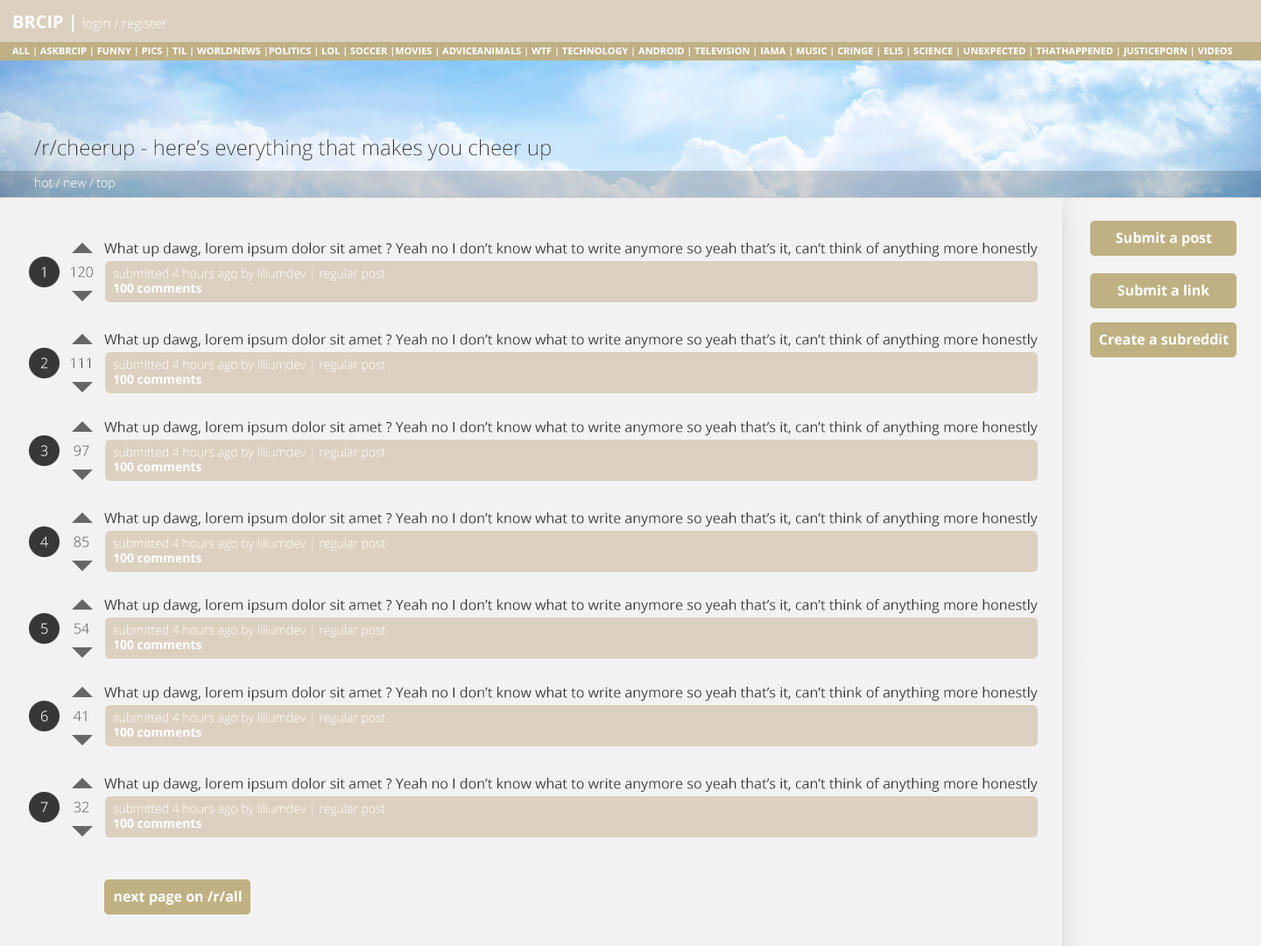
<style>
.page{position:relative;width:1261px;height:946px;background:#f2f2f2}
.page>*{position:absolute;margin:0}
.t1{font:13.1px "OpenSans-Light";color:#ffffff}
.t2{font:17.5px "OpenSans-Bold";color:#ffffff}
.t3{font:9.6px "OpenSans-Bold";color:#ffffff}
.t4{font:21px "OpenSans-Light";color:#373737}
.t5{font:12.3px "OpenSans-Light";color:#ffffff}
.t6{font:14px "OpenSans-Bold";color:#fefefe}
.t7{font:14px "OpenSans";color:#373737}
.t8{font:14px "OpenSans-Light"}
.t9{font:12.3px "OpenSans-Bold";color:#ffffff}
.t10{font:14px "OpenSans-Light";color:#ffffff}
.t11{font:14px "OpenSans-Light";color:#373737}
</style>
<div class="page">
<p class="t1" style="left:13px;top:14px;width:154px;height:18px"><span class="t2">BRCIP | </span>login / register</p>
<p class="t3" style="left:12px;top:46px;width:1220px;height:11px">ALL | ASKBRCIP | FUNNY | PICS | TIL | WORLDNEWS |POLITICS | LOL | SOCCER |MOVIES | ADVICEANIMALS | WTF | TECHNOLOGY | ANDROID | TELEVISION | IAMA | MUSIC | CRINGE | ELI5 | SCIENCE | UNEXPECTED | THATHAPPENED | JUSTICEPORN | VIDEOS</p>
<p class="t4" style="left:34px;top:139px;width:517px;height:21px">/r/cheerup - here’s everything that makes you cheer up</p>
<p class="t5" style="left:35px;top:178px;width:80px;height:12px">hot / new / top</p>
<p class="t6" style="left:1116px;top:232px;width:96px;height:14px">Submit a post</p>
<p class="t7" style="left:104px;top:243px;width:934px;height:14px">What up dawg, lorem ipsum dolor sit amet ? Yeah no I don’t know what to write anymore so yeah that’s it, can’t think of anything more honestly</p>
<p class="t8" style="left:41px;top:266px;width:5px;height:12px">1</p>
<p class="t8" style="left:71px;top:266px;width:22px;height:12px">120</p>
<p class="t5" style="left:113px;top:268px;width:272px;height:25px">submitted 4 hours ago by liliumdev | regular post<br><span class="t9">100 comments</span></p>
<p class="t6" style="left:1117px;top:285px;width:93px;height:11px">Submit a link</p>
<p class="t7" style="left:104px;top:334px;width:934px;height:14px">What up dawg, lorem ipsum dolor sit amet ? Yeah no I don’t know what to write anymore so yeah that’s it, can’t think of anything more honestly</p>
<p class="t6" style="left:1099px;top:334px;width:130px;height:11px">Create a subreddit</p>
<p class="t10" style="left:41px;top:357px;width:7px;height:12px">2</p>
<p class="t11" style="left:71px;top:357px;width:19px;height:12px">111</p>
<p class="t5" style="left:113px;top:359px;width:272px;height:25px">submitted 4 hours ago by liliumdev | regular post<br><span class="t9">100 comments</span></p>
<p class="t7" style="left:104px;top:421px;width:934px;height:14px">What up dawg, lorem ipsum dolor sit amet ? Yeah no I don’t know what to write anymore so yeah that’s it, can’t think of anything more honestly</p>
<p class="t8" style="left:40px;top:445px;width:7px;height:11px">3</p>
<p class="t11" style="left:74px;top:445px;width:15px;height:11px">97</p>
<p class="t5" style="left:113px;top:447px;width:272px;height:25px">submitted 4 hours ago by liliumdev | regular post<br><span class="t9">100 comments</span></p>
<p class="t7" style="left:104px;top:512px;width:934px;height:14px">What up dawg, lorem ipsum dolor sit amet ? Yeah no I don’t know what to write anymore so yeah that’s it, can’t think of anything more honestly</p>
<p class="t8" style="left:40px;top:536px;width:8px;height:11px">4</p>
<p class="t8" style="left:74px;top:536px;width:15px;height:11px">85</p>
<p class="t5" style="left:113px;top:538px;width:272px;height:25px">submitted 4 hours ago by liliumdev | regular post<br><span class="t9">100 comments</span></p>
<p class="t7" style="left:104px;top:599px;width:934px;height:14px">What up dawg, lorem ipsum dolor sit amet ? Yeah no I don’t know what to write anymore so yeah that’s it, can’t think of anything more honestly</p>
<p class="t8" style="left:41px;top:623px;width:7px;height:11px">5</p>
<p class="t8" style="left:74px;top:623px;width:15px;height:11px">54</p>
<p class="t5" style="left:113px;top:624px;width:272px;height:26px">submitted 4 hours ago by liliumdev | regular post<br><span class="t9">100 comments</span></p>
<p class="t7" style="left:104px;top:686px;width:934px;height:15px">What up dawg, lorem ipsum dolor sit amet ? Yeah no I don’t know what to write anymore so yeah that’s it, can’t think of anything more honestly</p>
<p class="t10" style="left:41px;top:710px;width:7px;height:12px">6</p>
<p class="t8" style="left:74px;top:710px;width:13px;height:12px">41</p>
<p class="t5" style="left:113px;top:712px;width:272px;height:25px">submitted 4 hours ago by liliumdev | regular post<br><span class="t9">100 comments</span></p>
<p class="t7" style="left:104px;top:778px;width:934px;height:14px">What up dawg, lorem ipsum dolor sit amet ? Yeah no I don’t know what to write anymore so yeah that’s it, can’t think of anything more honestly</p>
<p class="t8" style="left:40px;top:801px;width:8px;height:12px">7</p>
<p class="t11" style="left:74px;top:801px;width:15px;height:12px">32</p>
<p class="t5" style="left:113px;top:803px;width:272px;height:25px">submitted 4 hours ago by liliumdev | regular post<br><span class="t9">100 comments</span></p>
<p class="t6" style="left:114px;top:891px;width:128px;height:14px">next page on /r/all</p>
</div>
